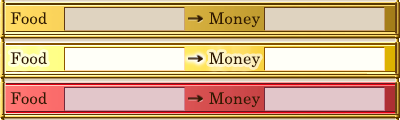
<style>
.page{position:relative;width:400px;height:120px}
.page>*{position:absolute;margin:0}
.t1{font:16px "CenturySchoolbook";letter-spacing:0.025em;color:#321a02}
</style>
<div class="page">
<p class="t1" style="left:10px;top:12px;width:37px;height:13px">Food</p>
<p class="t1" style="left:209px;top:12px;width:51px;height:16px">Money</p>
<p class="t1" style="left:10px;top:52px;width:37px;height:13px">Food</p>
<p class="t1" style="left:209px;top:52px;width:51px;height:16px">Money</p>
<p class="t1" style="left:10px;top:92px;width:37px;height:13px">Food</p>
<p class="t1" style="left:209px;top:92px;width:51px;height:16px">Money</p>
</div>
